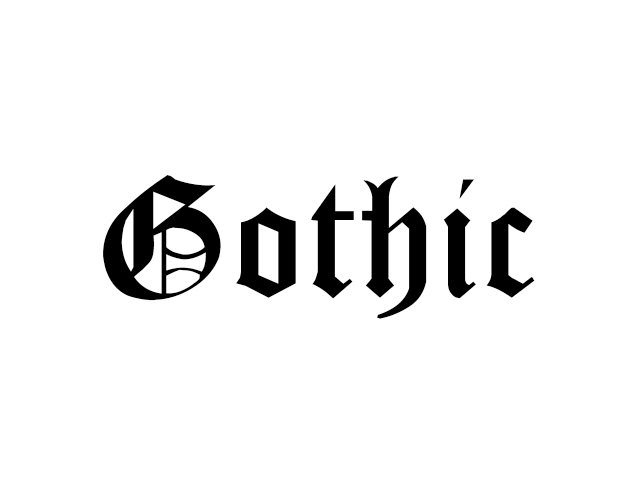
<style>
.page{position:relative;width:640px;height:480px;background:#ffffff}
.page>*{position:absolute;margin:0}
.t1{font:180px "CloisterBlack-Light";color:#000000}
</style>
<div class="page">
<p class="t1" style="left:103px;top:174px;width:432px;height:145px">Gothic</p>
</div>
